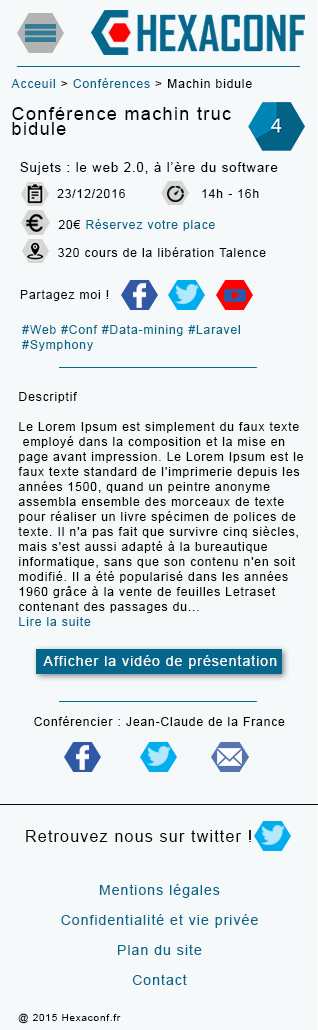
<style>
.page{position:relative;width:318px;height:1030px;background:#f6f9fa}
.page>*{position:absolute;margin:0}
.t1{font:12px "ArialMT";letter-spacing:0.075em;color:#000405}
.t2{font:12px "ArialMT";letter-spacing:0.075em;color:#05678b}
.t3{font:18px/15px "ArialMT";letter-spacing:0.075em;color:#000709}
.t4{font:13px "ArialMT";letter-spacing:0.075em;color:#000709}
.t5{font:12px "ArialMT";letter-spacing:0.075em;color:#000709}
.t6{font:12px "ArialMT";letter-spacing:0.075em;color:#00090c}
.t7{font:12px/15px "ArialMT";letter-spacing:0.075em;color:#05678b}
.t8{font:12px/15px "ArialMT";letter-spacing:0.075em;color:#000101}
.t9{font:14px "ArialMT";letter-spacing:0.075em;color:#fefdfd}
.t10{font:12px "ArialMT";letter-spacing:0.075em;color:#010000}
.t11{font:16px "ArialMT";letter-spacing:0.075em;color:#000000}
.t12{font:14px/15px "ArialMT";letter-spacing:0.075em;color:#05678b}
.t13{font:10px "ArialMT";letter-spacing:0.075em;color:#00090c}
</style>
<div class="page">
<p class="t1" style="left:11px;top:78px;width:241px;height:10px"><span class="t2">Acceuil </span>&gt; <span class="t2">Conférences </span>&gt; Machin bidule</p>
<p class="t3" style="left:12px;top:107px;width:219px;height:28px">Conférence machin truc <br>bidule</p>
<p class="t4" style="left:20px;top:162px;width:258px;height:13px">Sujets : le web 2.0, à l’ère du software</p>
<p class="t5" style="left:57px;top:189px;width:202px;height:9px">23/12/2016   14h - 16h</p>
<p class="t2" style="left:58px;top:219px;width:157px;height:12px"><span class="t5">20€ </span>Réservez votre place</p>
<p class="t6" style="left:58px;top:247px;width:208px;height:10px">320 cours de la libération Talence</p>
<p class="t6" style="left:20px;top:290px;width:89px;height:11px">Partagez moi !</p>
<p class="t7" style="left:22px;top:325px;width:218px;height:26px">#Web #Conf #Data-mining #Laravel <br>#Symphony</p>
<p class="t8" style="left:18px;top:392px;width:285px;height:234px">Descriptif<br><br>Le Lorem Ipsum est simplement du faux texte<br> employé dans la composition et la mise en <br>page avant impression. Le Lorem Ipsum est le <br>faux texte standard de l'imprimerie depuis les <br>années 1500, quand un peintre anonyme <br>assembla ensemble des morceaux de texte <br>pour réaliser un livre spécimen de polices de <br>texte. Il n'a pas fait que survivre cinq siècles, <br>mais s'est aussi adapté à la bureautique <br>informatique, sans que son contenu n'en soit <br>modifié. Il a été popularisé dans les années <br>1960 grâce à la vente de feuilles Letraset <br>contenant des passages du...<br><span class="t7">Lire la suite</span></p>
<p class="t9" style="left:43px;top:655px;width:234px;height:14px">Afficher la vidéo de présentation</p>
<p class="t10" style="left:34px;top:716px;width:251px;height:10px">Conférencier : Jean-Claude de la France</p>
<p class="t11" style="left:26px;top:830px;width:225px;height:12px">Retrouvez nous sur twitter !</p>
<p class="t12" style="left:61px;top:884px;width:197px;height:101px;text-align:center">Mentions légales<br><br>Confidentialité et vie privée<br><br>Plan du site<br><br>Contact</p>
<p class="t13" style="left:18px;top:1013px;width:103px;height:11px">@ 2015 Hexaconf.fr</p>
</div>
